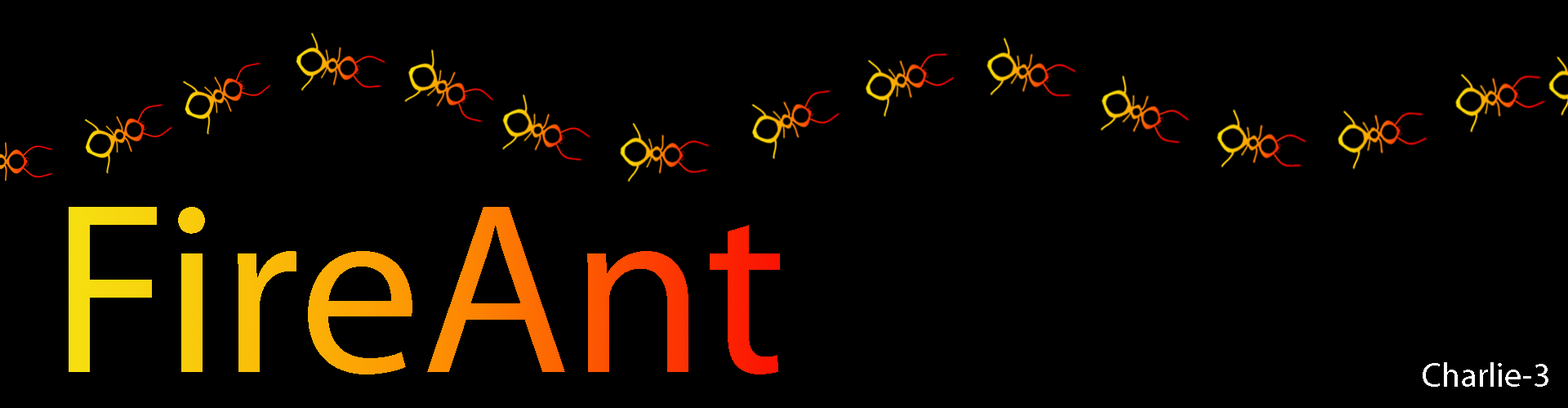
<style>
.page{position:relative;width:1568px;height:408px;background:#000000}
.page>*{position:absolute;margin:0}
.t1{font:245px "MyriadPro-Regular"}
.t2{font:34px "MyriadPro-Regular";color:#ffffff}
</style>
<div class="page">
<p class="t1" style="left:69px;top:207px;width:711px;height:167px">FireAnt</p>
<p class="t2" style="left:1423px;top:362px;width:125px;height:24px">Charlie-3</p>
</div>
